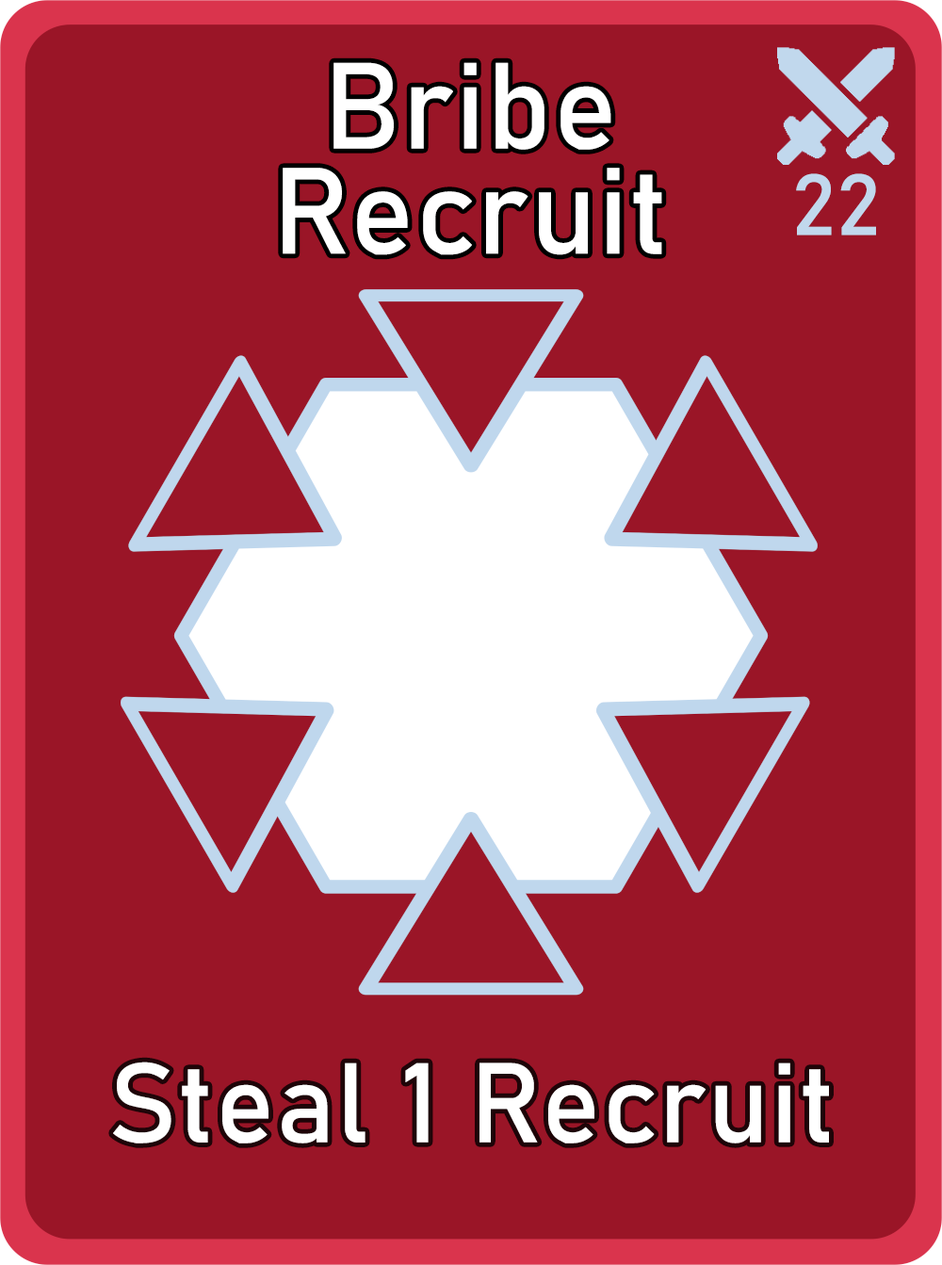
<style>
.page{position:relative;width:942px;height:1265px;background:#9a1527}
.page>*{position:absolute;margin:0}
.t1{font:120.6px/105.1px "Bahnschrift";letter-spacing:0.01em;color:#ffffff}
.t2{font:85px "Bahnschrift";letter-spacing:0.01em;color:#c1d8ed}
.t3{font:111.3px "Bahnschrift";letter-spacing:0.01em;color:#ffffff}
</style>
<div class="page">
<p class="t1" style="left:283px;top:62px;width:379px;height:193px;text-align:center">Bribe<br>Recruit</p>
<p class="t2" style="left:796px;top:173px;width:80px;height:63px">22</p>
<p class="t3" style="left:113px;top:1062px;width:716px;height:82px">Steal 1 Recruit</p>
</div>
